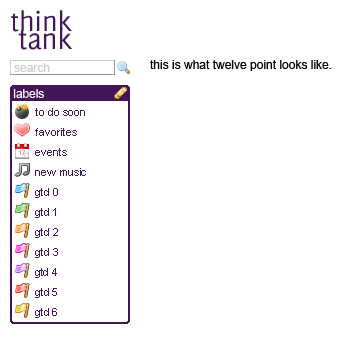
<style>
.page{position:relative;width:351px;height:351px;background:#ffffff}
.page>*{position:absolute;margin:0}
.t1{font:30px "Delicious-Roman";color:#431458}
.t2{font:31px "Delicious-Roman";letter-spacing:-0.005em;color:#431458}
.t3{font:12px "ArialMT";color:#cccccc}
.t4{font:12px "ArialUnicodeMS";color:#000000}
.t5{font:12px "ArialMT";letter-spacing:-0.005em;color:#ffffff}
.t6{font:11px "ArialMT";letter-spacing:-0.005em;color:#431458}
</style>
<div class="page">
<p class="t1" style="left:11px;top:10px;width:61px;height:22px">think</p>
<p class="t2" style="left:18px;top:27px;width:54px;height:23px">tank</p>
<p class="t3" style="left:14px;top:63px;width:36px;height:9px">search</p>
<p class="t4" style="left:150px;top:60px;width:182px;height:11px">this is what twelve point looks like.</p>
<p class="t5" style="left:13px;top:89px;width:31px;height:9px">labels</p>
<p class="t6" style="left:35px;top:108px;width:50px;height:8px">to do soon</p>
<p class="t6" style="left:35px;top:128px;width:42px;height:8px">favorites</p>
<p class="t6" style="left:35px;top:148px;width:32px;height:8px">events</p>
<p class="t6" style="left:35px;top:168px;width:51px;height:8px">new music</p>
<p class="t6" style="left:35px;top:188px;width:23px;height:10px">gtd 0</p>
<p class="t6" style="left:35px;top:208px;width:21px;height:10px">gtd 1</p>
<p class="t6" style="left:35px;top:228px;width:23px;height:10px">gtd 2</p>
<p class="t6" style="left:35px;top:248px;width:23px;height:10px">gtd 3</p>
<p class="t6" style="left:35px;top:268px;width:22px;height:10px">gtd 4</p>
<p class="t6" style="left:35px;top:288px;width:22px;height:10px">gtd 5</p>
<p class="t6" style="left:35px;top:308px;width:22px;height:10px">gtd 6</p>
</div>
